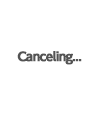
<style>
.page{position:relative;width:100px;height:116px;background:#ffffff}
.page>*{position:absolute;margin:0}
.t1{font:12px "UDShinGoPro-Bold";letter-spacing:-0.08em;color:#535353;font-weight:bold}
</style>
<div class="page">
<p class="t1" style="left:17px;top:51px;width:65px;height:14px">Canceling...</p>
</div>
